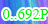
<style>
.page{position:relative;width:48px;height:24px;background:#ffffff}
.page>*{position:absolute;margin:0}
.t1{font:15px "TimesNewRomanPSMT";color:#00f006}
</style>
<div class="page">
<p class="t1" style="left:3px;top:9px;width:46px;height:10px">0..692P</p>
</div>
